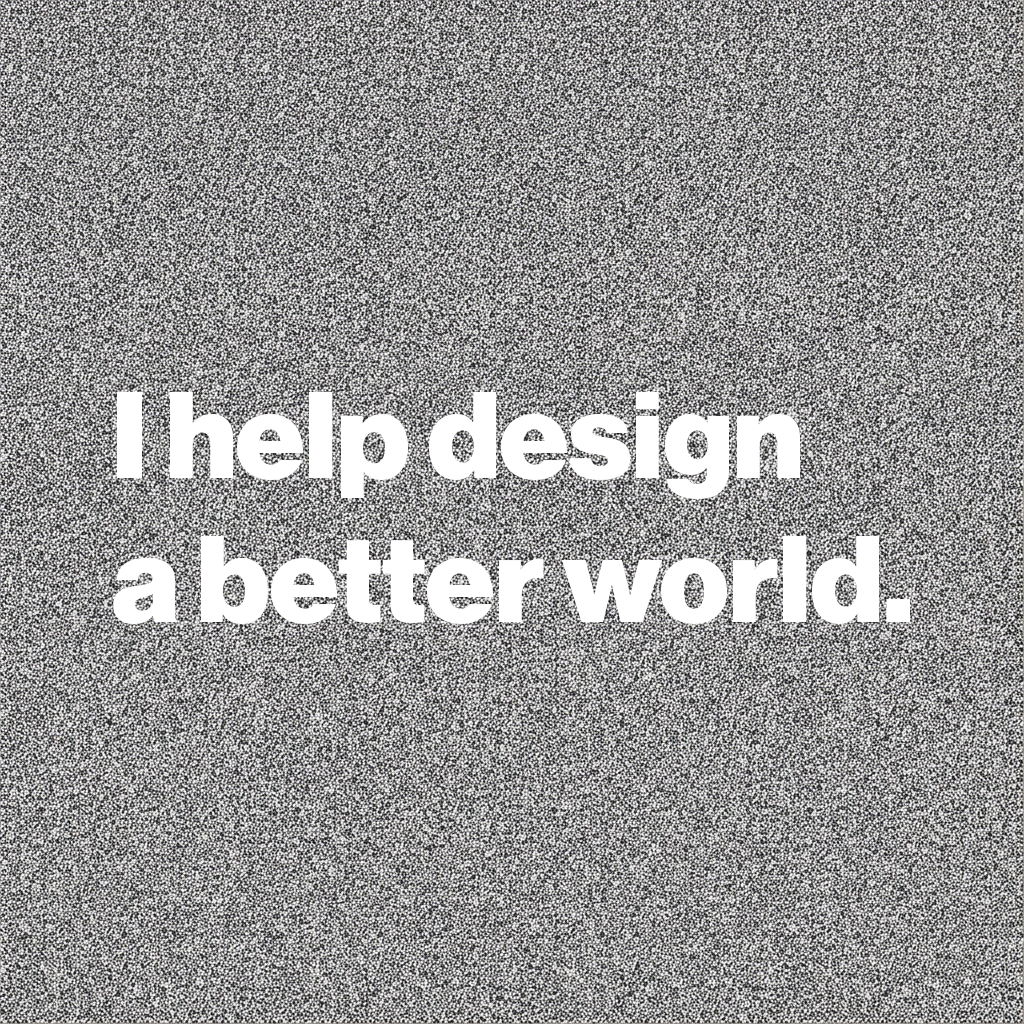
<style>
.page{position:relative;width:1024px;height:1024px}
.page>*{position:absolute;margin:0}
.t1{font:120px "NHaasGroteskDSPro-95Blk";color:#ffffff}
</style>
<div class="page">
<p class="t1" style="left:113px;top:391px;width:797px;height:234px">I help design <br>a better world.</p>
</div>
